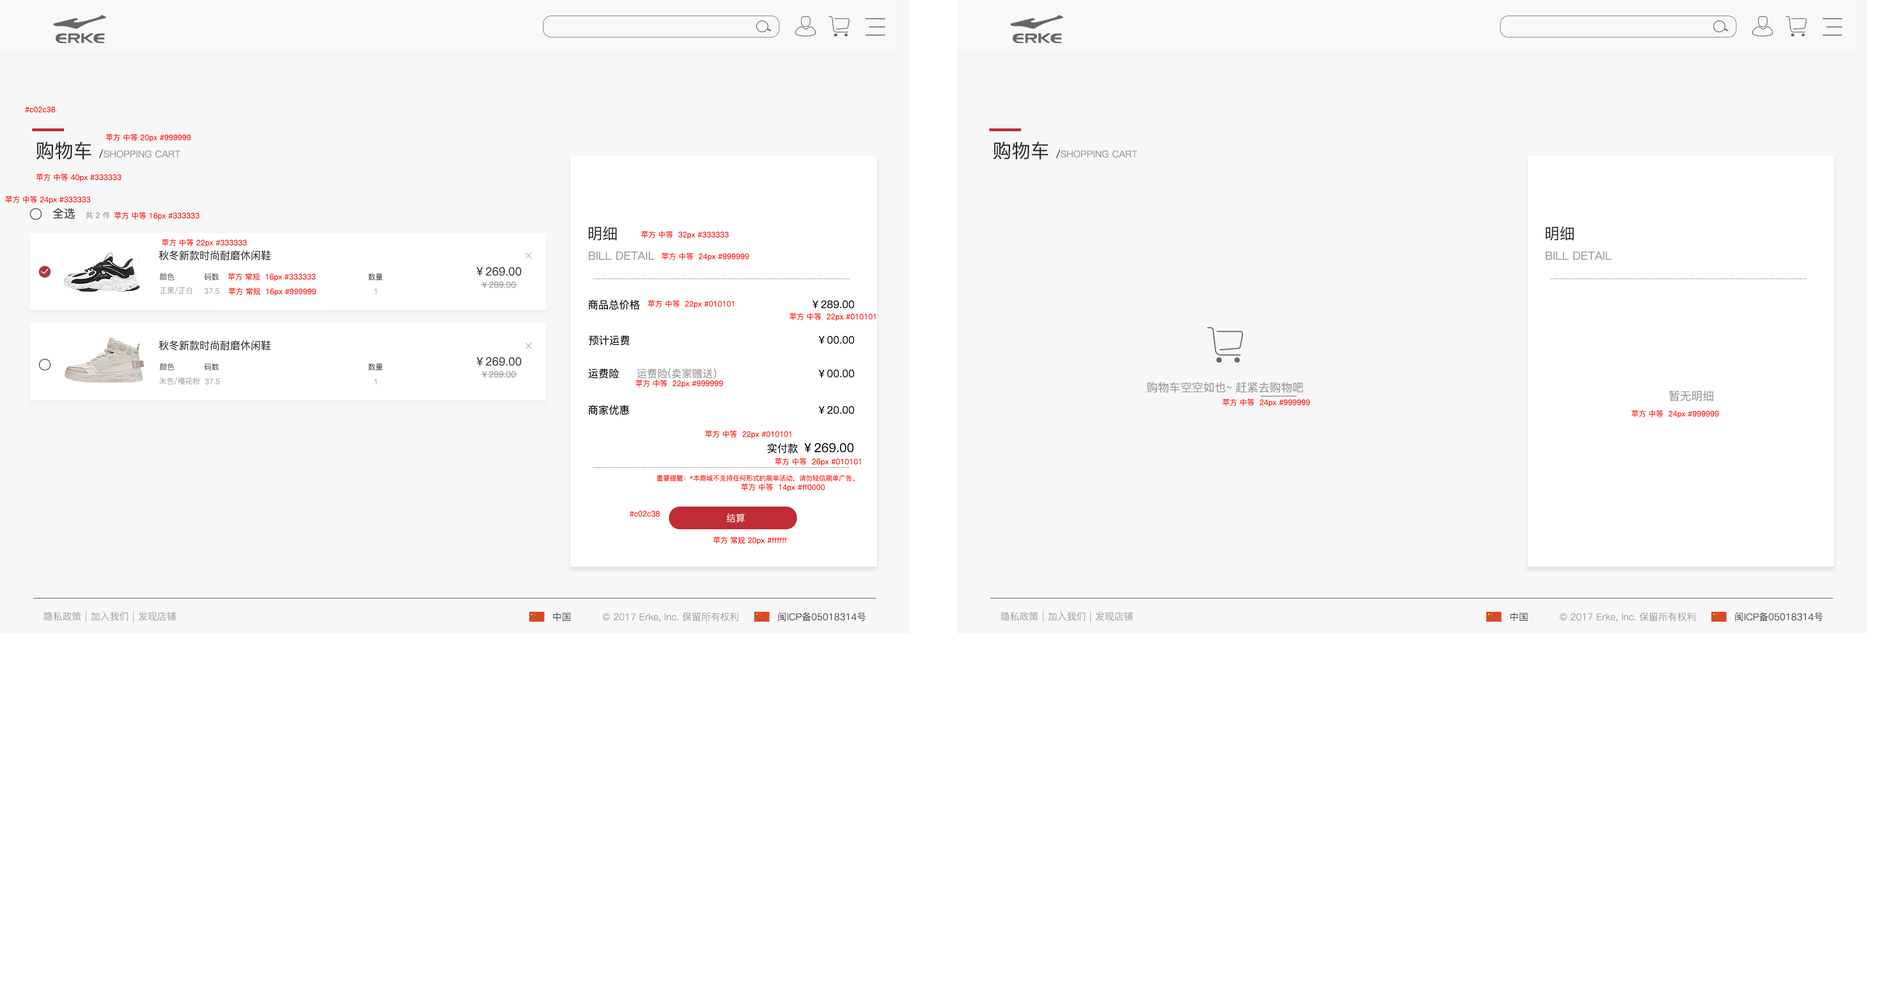
<style>
.page{position:relative;width:1880px;height:997px;background:#ffffff}
.page>*{position:absolute;margin:0}
.t1{font:7.6px "PingFang-SC-Medium";color:#ff0000}
.t2{font:9.5px "PingFang-SC-Medium";color:#999999}
.t3{font:18.9px "PingFang-SC-Medium";color:#333333}
.t4{font:9.5px "PingFang-SC-Medium";color:#333333}
.t5{font:11.4px "PingFang-SC-Medium";color:#333333}
.t6{font:7.6px "PingFang-SC-Medium";color:#999999}
.t7{font:15.2px "PingFang-SC-Medium";color:#333333}
.t8{font:10.4px "PingFang-SC-Medium";color:#323232}
.t9{font:11.4px "PingFang-SC-Medium";color:#999999}
.t10{font:7.6px "PingFang-SC-Regular";color:#323232}
.t11{font:8.5px "PingFang-SC-Medium";color:#999999}
.t12{font:7.6px "PingFang-SC-Regular";color:#999999}
.t13{font:10.4px "PingFang-SC-Medium";color:#010101}
.t14{font:10.4px "PingFang-SC-Medium";color:#999999}
.t15{font:12.3px "PingFang-SC-Medium";color:#010101}
.t16{font:6.6px "PingFang-SC-Medium";color:#ff0000}
.t17{font:9.5px "PingFang-SC-Regular";color:#ffffff}
.t18{font:9.5px "PingFang-SC-Regular";color:#999999}
.t19{font:9.5px "PingFang-SC-Regular";color:#333333}
</style>
<div class="page">
<p class="t1" style="left:25px;top:107px;width:30px;height:6px">#c02c38</p>
<p class="t1" style="left:106px;top:134px;width:85px;height:8px">苹方 中等 20px #999999</p>
<p class="t2" style="left:36px;top:142px;width:144px;height:18px"><span class="t3">购物车 </span><span class="t4">/</span>SHOPPING CART</p>
<p class="t2" style="left:993px;top:142px;width:144px;height:18px"><span class="t3">购物车 </span><span class="t4">/</span>SHOPPING CART</p>
<p class="t1" style="left:36px;top:173px;width:85px;height:8px">苹方 中等 40px #333333</p>
<p class="t1" style="left:5px;top:196px;width:85px;height:8px">苹方 中等 24px #333333</p>
<p class="t5" style="left:53px;top:208px;width:22px;height:11px">全选</p>
<p class="t6" style="left:86px;top:211px;width:24px;height:8px">共 2 件</p>
<p class="t1" style="left:114px;top:212px;width:85px;height:8px">苹方 中等 16px #333333</p>
<p class="t7" style="left:588px;top:226px;width:29px;height:15px">明细</p>
<p class="t1" style="left:641px;top:231px;width:88px;height:8px">苹方 中等  32px #333333</p>
<p class="t7" style="left:1545px;top:226px;width:29px;height:15px">明细</p>
<p class="t1" style="left:162px;top:239px;width:85px;height:8px">苹方 中等 22px #333333</p>
<p class="t8" style="left:159px;top:250px;width:112px;height:11px">秋冬新款时尚耐磨休闲鞋</p>
<p class="t9" style="left:588px;top:251px;width:67px;height:9px">BILL DETAIL</p>
<p class="t1" style="left:661px;top:252px;width:88px;height:9px">苹方 中等  24px #999999</p>
<p class="t9" style="left:1545px;top:251px;width:66px;height:9px">BILL DETAIL</p>
<p class="t5" style="left:477px;top:267px;width:45px;height:9px">￥269.00</p>
<p class="t10" style="left:160px;top:273px;width:14px;height:7px">颜色</p>
<p class="t10" style="left:204px;top:273px;width:15px;height:7px">码数</p>
<p class="t1" style="left:228px;top:273px;width:87px;height:8px">苹方 常规  16px #333333</p>
<p class="t10" style="left:368px;top:273px;width:15px;height:7px">数量</p>
<p class="t11" style="left:482px;top:281px;width:34px;height:7px">￥289.00</p>
<p class="t12" style="left:160px;top:287px;width:32px;height:7px">正黑/正白</p>
<p class="t12" style="left:204px;top:288px;width:15px;height:6px">37.5</p>
<p class="t1" style="left:228px;top:288px;width:88px;height:8px">苹方 常规  16px #999999</p>
<p class="t12" style="left:374px;top:288px;width:3px;height:6px">1</p>
<p class="t13" style="left:588px;top:299px;width:51px;height:11px">商品总价格</p>
<p class="t1" style="left:648px;top:300px;width:86px;height:8px">苹方 中等  22px #010101</p>
<p class="t13" style="left:812px;top:300px;width:42px;height:8px">￥289.00</p>
<p class="t1" style="left:789px;top:313px;width:86px;height:8px">苹方 中等  22px #010101</p>
<p class="t8" style="left:159px;top:340px;width:112px;height:11px">秋冬新款时尚耐磨休闲鞋</p>
<p class="t13" style="left:588px;top:335px;width:42px;height:10px">预计运费</p>
<p class="t13" style="left:819px;top:336px;width:35px;height:8px">￥00.00</p>
<p class="t10" style="left:160px;top:363px;width:14px;height:7px">颜色</p>
<p class="t10" style="left:204px;top:363px;width:15px;height:7px">码数</p>
<p class="t10" style="left:368px;top:363px;width:15px;height:7px">数量</p>
<p class="t5" style="left:477px;top:357px;width:45px;height:9px">￥269.00</p>
<p class="t12" style="left:159px;top:377px;width:41px;height:8px">米色/樱花粉</p>
<p class="t11" style="left:482px;top:371px;width:34px;height:7px">￥289.00</p>
<p class="t13" style="left:588px;top:369px;width:31px;height:9px">运费险</p>
<p class="t14" style="left:637px;top:368px;width:79px;height:10px">运费险(卖家赠送）</p>
<p class="t13" style="left:819px;top:369px;width:35px;height:9px">￥00.00</p>
<p class="t12" style="left:205px;top:378px;width:15px;height:7px">37.5</p>
<p class="t12" style="left:374px;top:378px;width:3px;height:6px">1</p>
<p class="t1" style="left:635px;top:379px;width:88px;height:8px">苹方 中等  22px #999999</p>
<p class="t9" style="left:1146px;top:382px;width:157px;height:11px">购物车空空如也~ 赶紧去购物吧</p>
<p class="t1" style="left:1222px;top:398px;width:88px;height:8px">苹方 中等  24px #999999</p>
<p class="t9" style="left:1669px;top:390px;width:44px;height:11px">暂无明细</p>
<p class="t13" style="left:588px;top:405px;width:41px;height:10px">商家优惠</p>
<p class="t13" style="left:819px;top:406px;width:35px;height:8px">￥20.00</p>
<p class="t1" style="left:1631px;top:410px;width:88px;height:8px">苹方 中等  24px #999999</p>
<p class="t1" style="left:705px;top:430px;width:86px;height:8px">苹方 中等  22px #010101</p>
<p class="t15" style="left:767px;top:443px;width:87px;height:10px"><span class="t13">实付款 </span>￥269.00</p>
<p class="t1" style="left:774px;top:458px;width:87px;height:8px">苹方 中等  26px #010101</p>
<p class="t16" style="left:657px;top:475px;width:198px;height:7px">重要提醒：*本商城不支持任何形式的刷单活动，请勿轻信刷单广告。</p>
<p class="t1" style="left:741px;top:483px;width:84px;height:8px">苹方 中等  14px #ff0000</p>
<p class="t1" style="left:630px;top:511px;width:30px;height:6px">#c02c38</p>
<p class="t17" style="left:726px;top:513px;width:19px;height:9px">结算</p>
<p class="t1" style="left:713px;top:536px;width:74px;height:8px">苹方 常规 20px #ffffff</p>
<p class="t18" style="left:44px;top:612px;width:37px;height:9px">隐私政策</p>
<p class="t18" style="left:91px;top:612px;width:37px;height:9px">加入我们</p>
<p class="t18" style="left:138px;top:612px;width:38px;height:9px">发现店铺</p>
<p class="t19" style="left:553px;top:612px;width:17px;height:9px">中国</p>
<p class="t18" style="left:603px;top:612px;width:135px;height:9px">© 2017 Erke, Inc. 保留所有权利</p>
<p class="t19" style="left:778px;top:612px;width:88px;height:9px">闽ICP备05018314号</p>
<p class="t18" style="left:1001px;top:612px;width:37px;height:9px">隐私政策</p>
<p class="t18" style="left:1048px;top:612px;width:37px;height:9px">加入我们</p>
<p class="t18" style="left:1095px;top:612px;width:38px;height:9px">发现店铺</p>
<p class="t19" style="left:1510px;top:612px;width:17px;height:9px">中国</p>
<p class="t18" style="left:1559px;top:612px;width:136px;height:9px">© 2017 Erke, Inc. 保留所有权利</p>
<p class="t19" style="left:1735px;top:612px;width:88px;height:9px">闽ICP备05018314号</p>
</div>
